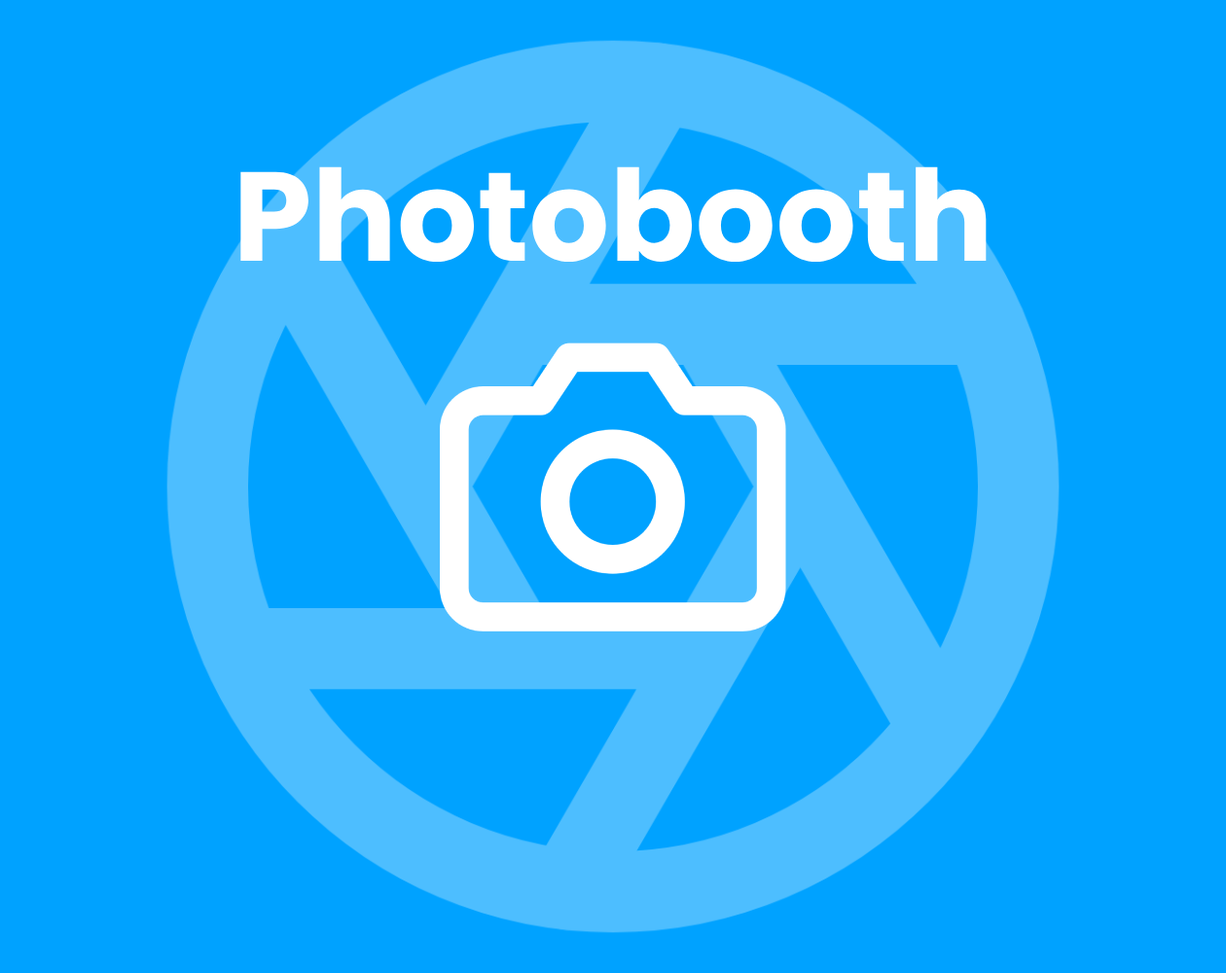
<style>
.page{position:relative;width:1226px;height:973px;background:#00a2ff}
.page>*{position:absolute;margin:0}
.t1{font:126.5px "Poppins-Bold";color:#ffffff}
</style>
<div class="page">
<p class="t1" style="left:240px;top:166px;width:746px;height:97px">Photobooth</p>
</div>
